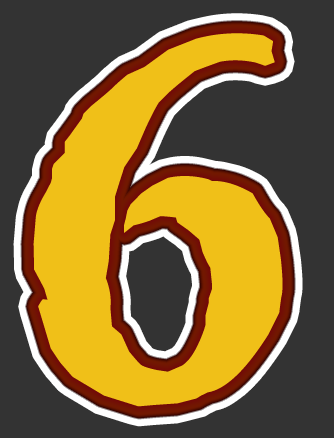
<style>
.page{position:relative;width:334px;height:438px;background:#333333}
.page>*{position:absolute;margin:0}
.t1{font:550px "PiecesofEight";letter-spacing:0.18em;color:#f0c018}
</style>
<div class="page">
<p class="t1" style="left:33px;top:33px;width:250px;height:374px">6</p>
</div>
